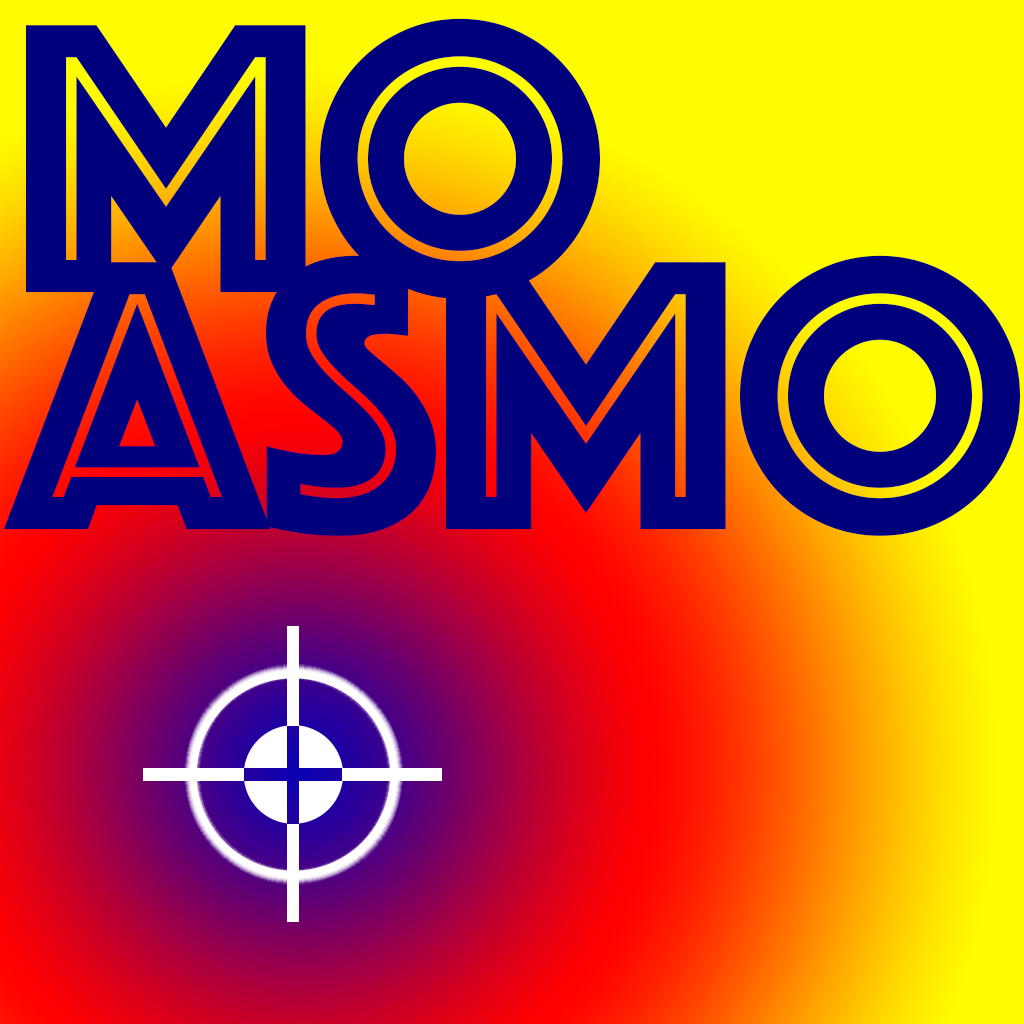
<style>
.page{position:relative;width:1024px;height:1024px;background:#00007d}
.page>*{position:absolute;margin:0}
.t1{font:400px/237.3px "Phosphate-Inline";letter-spacing:-0.02em;color:#00007d}
</style>
<div class="page">
<p class="t1" style="left:4px;top:18px;width:1016px;height:518px">MO<br>ASMO</p>
</div>
